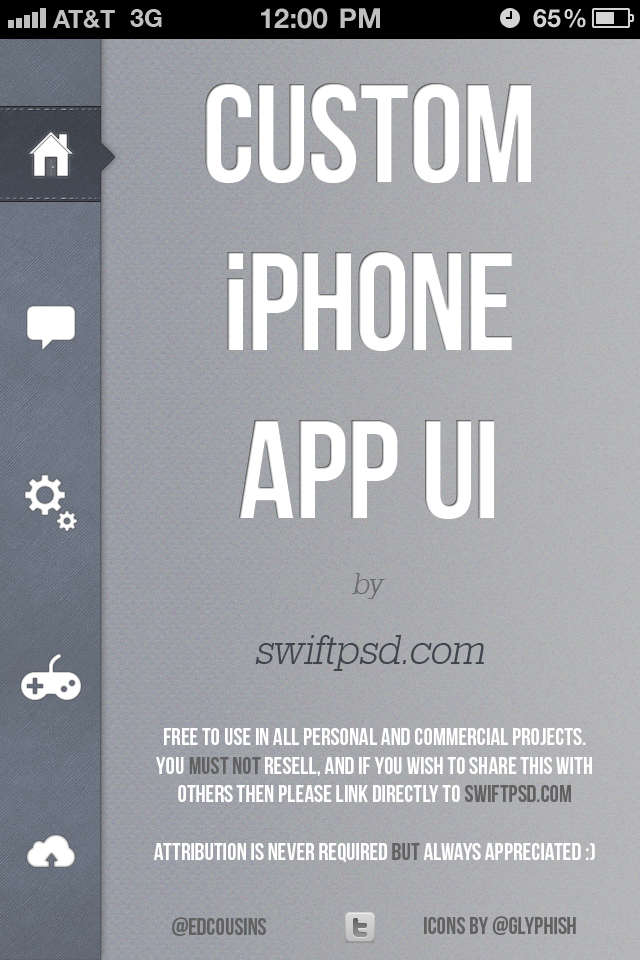
<style>
.page{position:relative;width:640px;height:960px}
.page>*{position:absolute;margin:0}
.t1{font:30px "GeometricSlab712BT-LightA";color:#666769;font-style:italic}
.t2{font:42px "GeometricSlab712BT-LightA";color:#40444c;font-style:italic}
.t3{font:24px "BebasNeue";color:#ffffff}
.t4{font:24px "BebasNeue";color:#616161}
</style>
<div class="page">
<p class="t1" style="left:352px;top:573px;width:33px;height:26px">by</p>
<p class="t2" style="left:255px;top:635px;width:229px;height:36px">swiftpsd.com</p>
<p class="t3" style="left:154px;top:728px;width:441px;height:134px;text-align:center">free to use in all personal and commercial projects. You <span class="t4">must not</span> resell, and if you wish to share this with others then please link directly to <span class="t4">SWIFTPSD.COM<br></span><br>Attribution is NEVER REQUIRED <span class="t4">BUT</span> always appreciated :)</p>
<p class="t4" style="left:172px;top:917px;width:94px;height:19px">@edcousins</p>
<p class="t4" style="left:424px;top:916px;width:152px;height:19px">Icons BY @glyphish</p>
</div>
